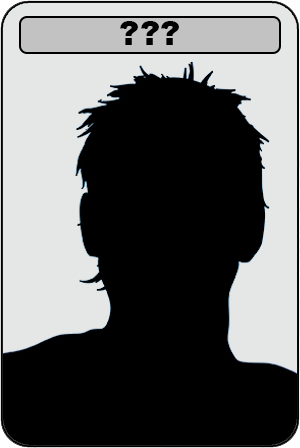
<style>
.page{position:relative;width:300px;height:448px;background:#000000}
.page>*{position:absolute;margin:0}
.t1{font:33.3px "Arial-Black";color:#010101}
</style>
<div class="page">
<p class="t1" style="left:120px;top:21px;width:59px;height:24px">???</p>
</div>
